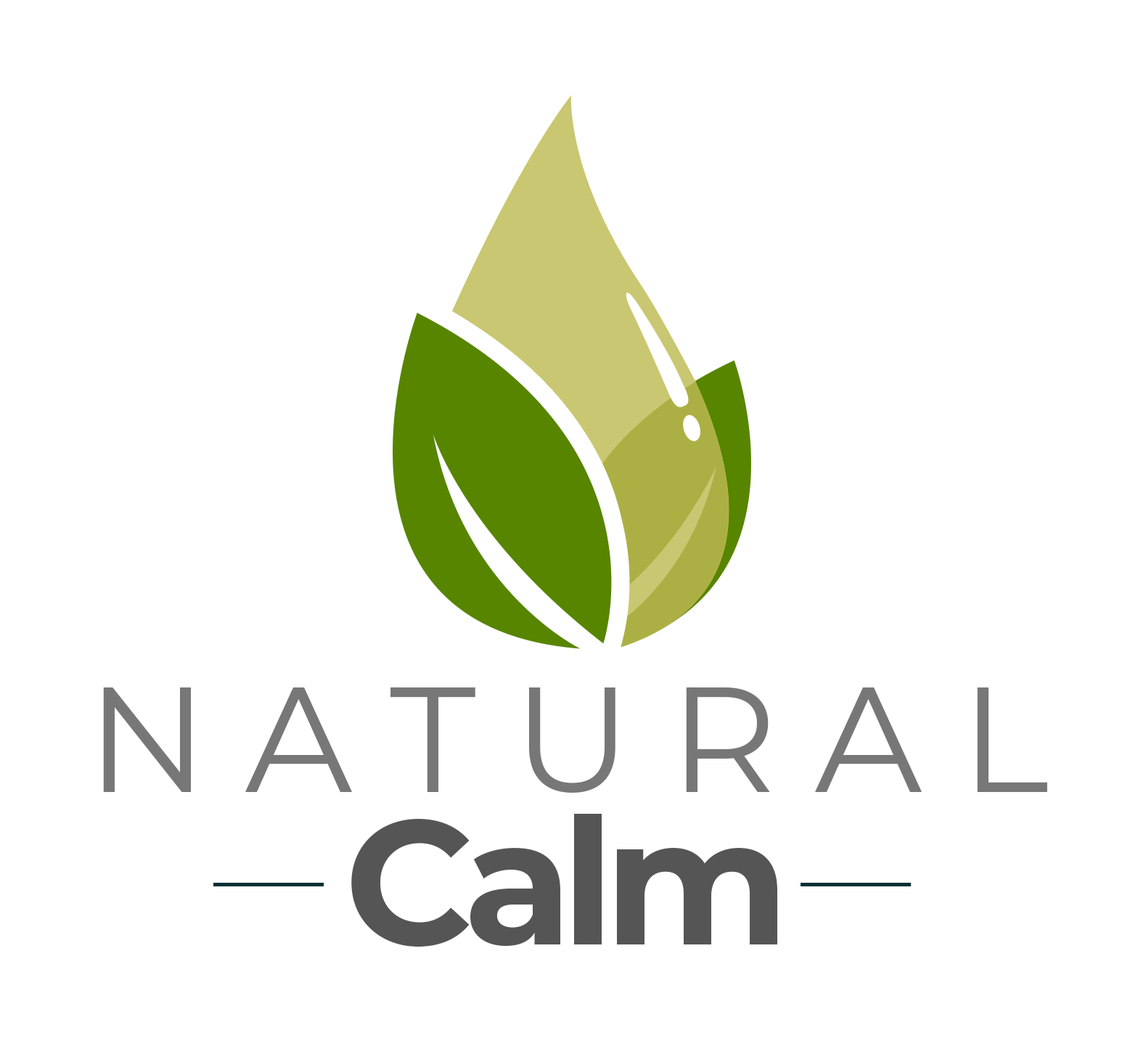
<style>
.page{position:relative;width:1146px;height:1041px;background:#ffffff}
.page>*{position:absolute;margin:0}
.t1{font:149.6px/130px "Montserrat-Regular";letter-spacing:0.25em;color:#777777}
.t2{font:176.1px/130px "Montserrat-Bold";letter-spacing:-0.06em;color:#555555}
</style>
<div class="page">
<p class="t1" style="left:103px;top:687px;width:944px;height:259px;text-align:center">NATURAL<br><span class="t2">Calm</span></p>
</div>
